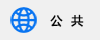
<style>
.page{position:relative;width:100px;height:40px;background:#f0f0f0}
.page>*{position:absolute;margin:0}
.t1{font:12px "MicrosoftYaHei";letter-spacing:0.2em;color:#050505;font-weight:bold}
</style>
<div class="page">
<p class="t1" style="left:50px;top:14px;width:34px;height:13px">公 共</p>
</div>
